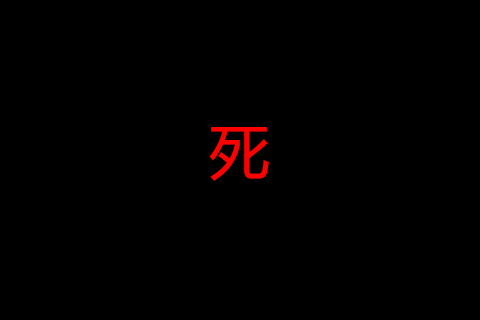
<style>
.page{position:relative;width:480px;height:320px;background:#000000}
.page>*{position:absolute;margin:0}
.t1{font:60.2px "MicrosoftYaHeiUI";color:#ff0000}
</style>
<div class="page">
<p class="t1" style="left:209px;top:127px;width:60px;height:54px">死</p>
</div>
